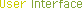
<style>
.page{position:relative;width:82px;height:8px;background:#ffffff}
.page>*{position:absolute;margin:0}
.t1{font:15px "PixelOperator";color:#83a637}
.t2{font:15px "PixelOperator";color:#cccc00}
</style>
<div class="page">
<p class="t1" style="left:0px;top:0px;width:82px;height:8px"><span class="t2">User </span>Interface</p>
</div>
